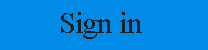
<style>
.page{position:relative;width:208px;height:50px;background:#008be7}
.page>*{position:absolute;margin:0}
.t1{font:30px "TimesNewRomanPSMT";color:#1e1e1e}
</style>
<div class="page">
<p class="t1" style="left:61px;top:12px;width:81px;height:27px">Sign in</p>
</div>
